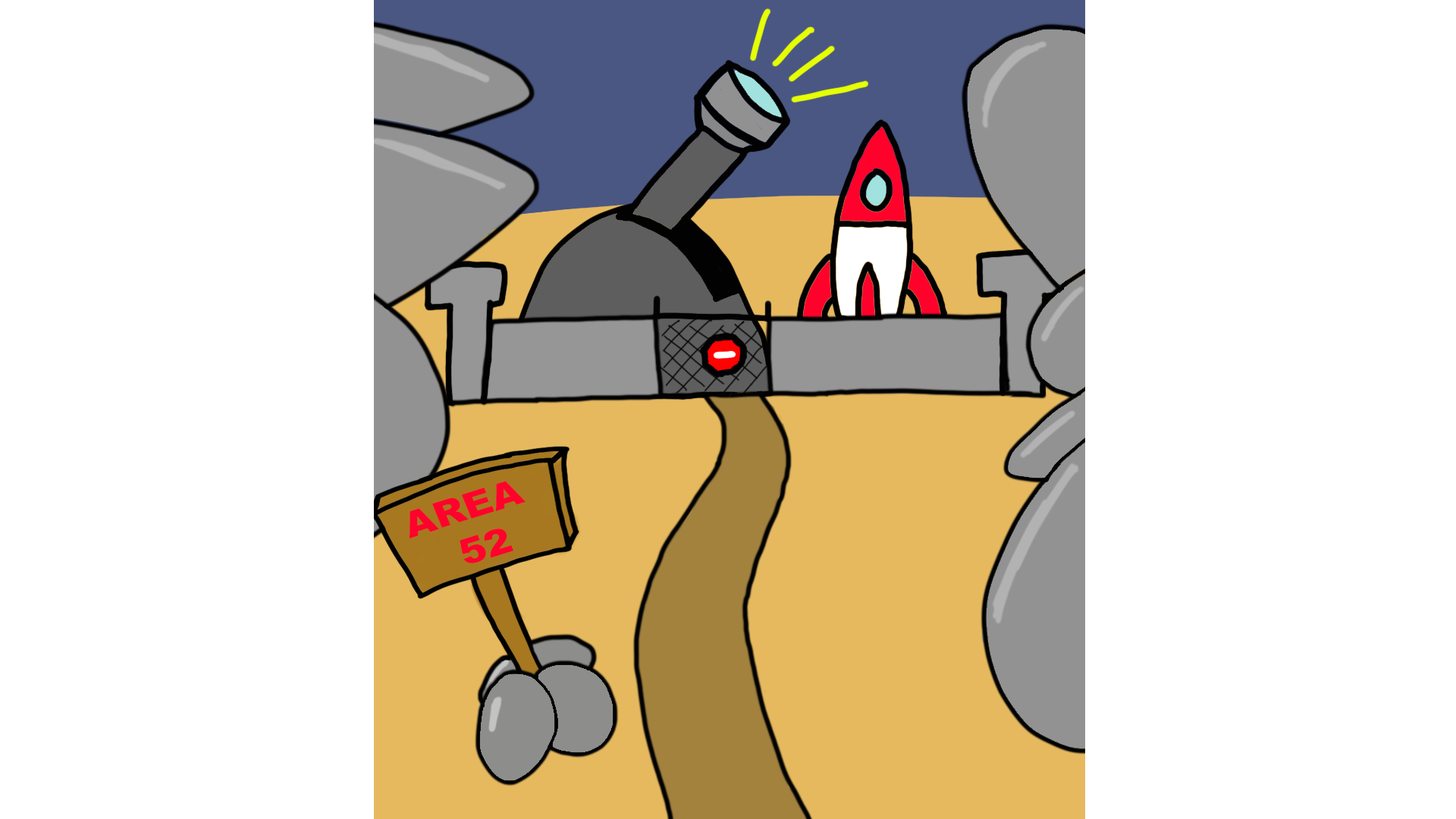
<style>
.page{position:relative;width:1456px;height:819px;background:#ffffff}
.page>*{position:absolute;margin:0}
.t1{font:36.1px "Arial-Black";color:#ff022c;scale:1.1 1}
</style>
<div class="page">
<p class="t1" style="left:409px;top:481px;width:117px;height:82px;text-align:center;rotate:-18deg">AREA <br>52</p>
</div>
